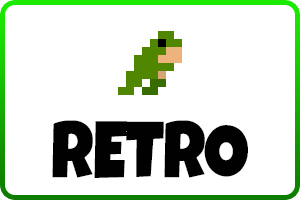
<style>
.page{position:relative;width:300px;height:200px;background:#ffffff}
.page>*{position:absolute;margin:0}
.t1{font:80.5px "LuckiestGuy-Regular";letter-spacing:-0.01em;color:#010101;text-transform:uppercase;scale:0.87 1}
</style>
<div class="page">
<p class="t1" style="left:52px;top:120px;width:196px;height:58px">RETRO</p>
</div>
